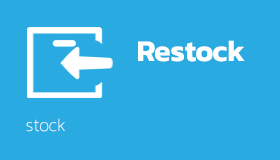
<style>
.page{position:relative;width:280px;height:160px;background:#29abe2}
.page>*{position:absolute;margin:0}
.t1{font:30px "Kanit-SemiBold";color:#ffffff}
.t2{font:18px "Kanit-Thin"}
</style>
<div class="page">
<p class="t1" style="left:138px;top:40px;width:107px;height:22px">Restock</p>
<p class="t2" style="left:26px;top:118px;width:39px;height:14px">stock</p>
</div>
